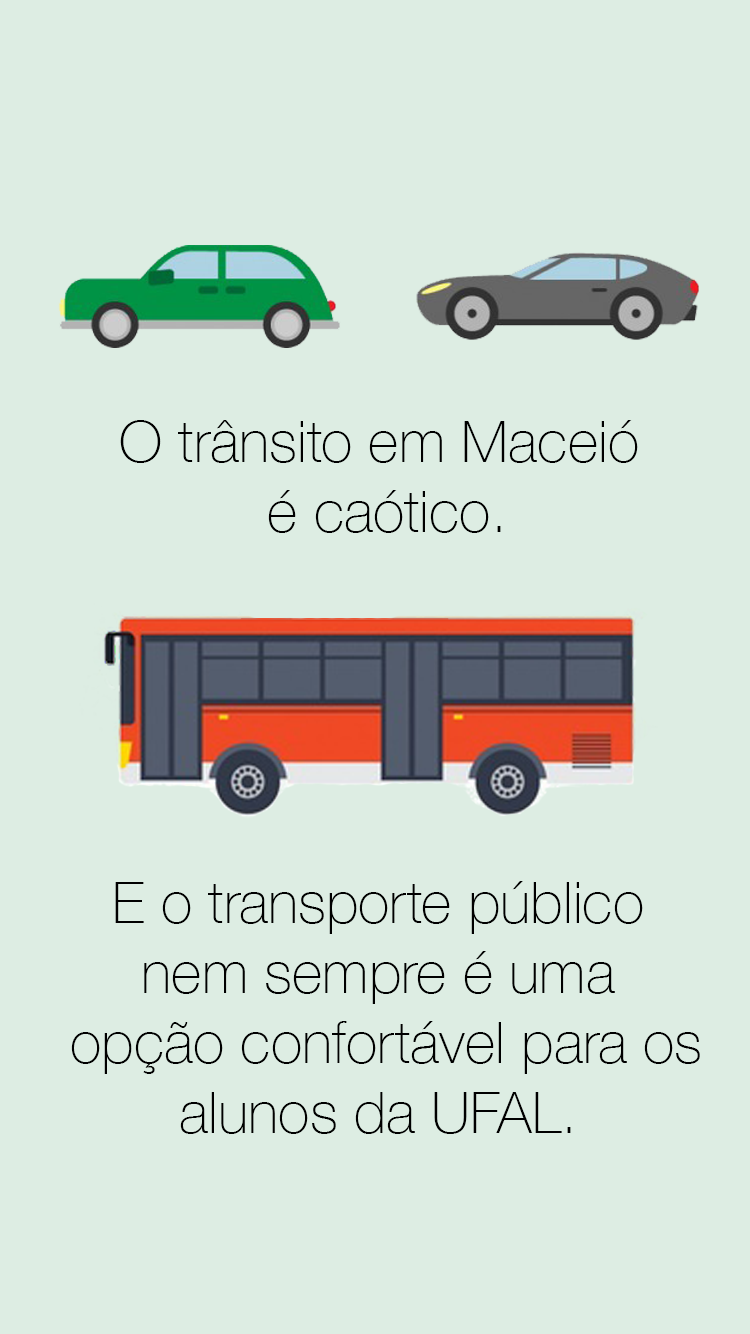
<style>
.page{position:relative;width:750px;height:1334px;background:#ddede3}
.page>*{position:absolute;margin:0}
.t1{font:58.2px "HelveticaNeue-Thin";color:#000000}
</style>
<div class="page">
<p class="t1" style="left:120px;top:420px;width:518px;height:113px;text-align:center">O trânsito em Maceió<br> é caótico.</p>
<p class="t1" style="left:71px;top:881px;width:629px;height:253px;text-align:center">E o transporte público<br>nem sempre é uma<br> opção confortável para os<br>alunos da UFAL.</p>
</div>
